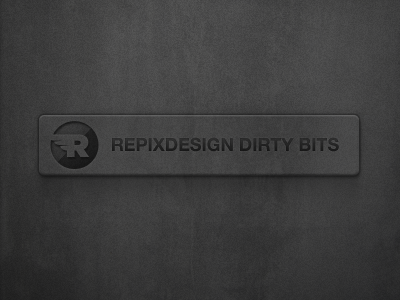
<style>
.page{position:relative;width:400px;height:300px}
.page>*{position:absolute;margin:0}
.t1{font:18px "HelveticaNeue-Bold";color:#202020;text-transform:uppercase}
</style>
<div class="page">
<p class="t1" style="left:112px;top:137px;width:227px;height:15px">REPIXDESIGN DIRTY BITS</p>
</div>
